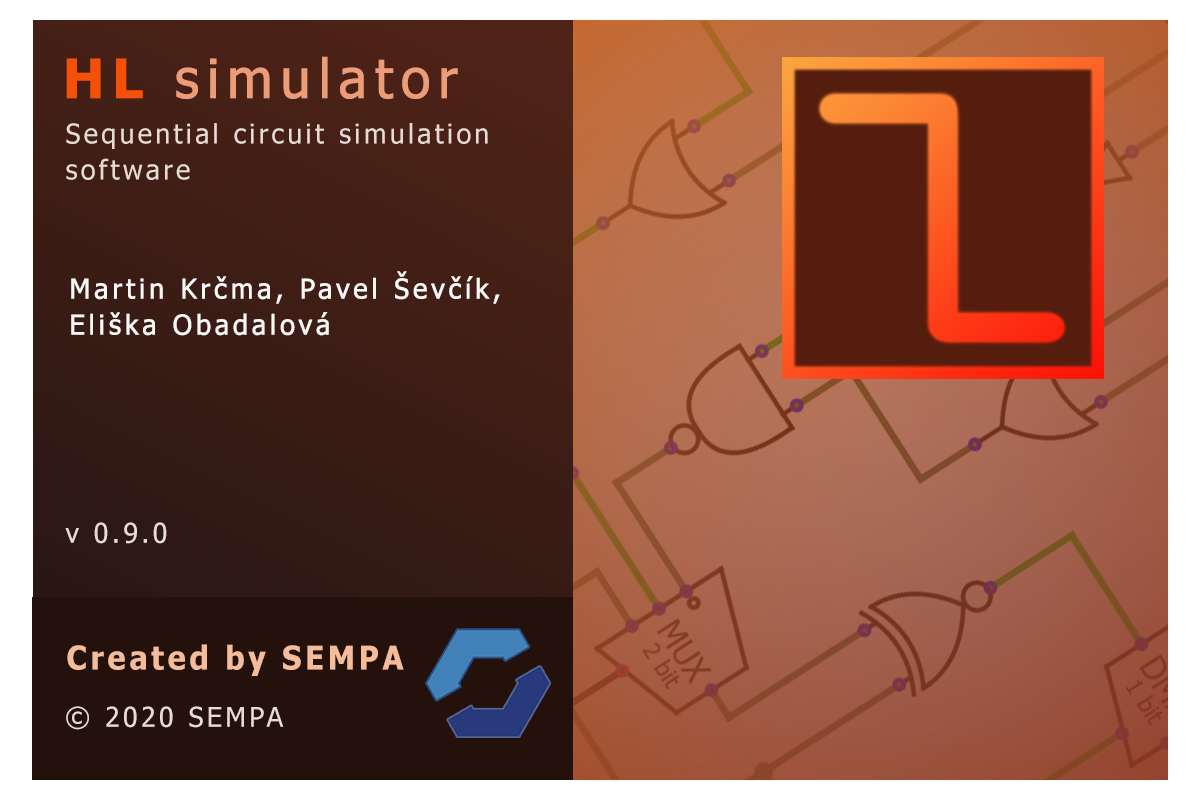
<style>
.page{position:relative;width:1200px;height:800px}
.page>*{position:absolute;margin:0}
.t1{font:54px "Tahoma";letter-spacing:0.12em;color:#ed9c78;font-weight:bold}
.t2{font:54px "Tahoma-Bold";letter-spacing:0.12em;color:#f45008;font-weight:bold}
.t3{font:27px "Tahoma";letter-spacing:0.12em;color:#e7dcd5}
.t4{font:27px "Tahoma";letter-spacing:0.12em;color:#faf8f6;font-weight:bold}
.t5{font:32.4px "Tahoma-Bold";letter-spacing:0.12em;color:#f4bc9a;scale:0.94 1}
</style>
<div class="page">
<p class="t1" style="left:66px;top:56px;width:392px;height:43px"><span class="t2">HL </span>simulator</p>
<p class="t3" style="left:66px;top:123px;width:422px;height:57px">Sequential circuit simulation <br>software</p>
<p class="t4" style="left:71px;top:271px;width:429px;height:65px">Martin Krčma, Pavel Ševčík,<br>Eliška Obadalová</p>
<p class="t3" style="left:65px;top:522px;width:102px;height:22px">v 0.9.0</p>
<p class="t5" style="left:67px;top:644px;width:337px;height:32px">Created by SEMPA</p>
<p class="t3" style="left:66px;top:706px;width:218px;height:24px">© 2020 SEMPA</p>
</div>
